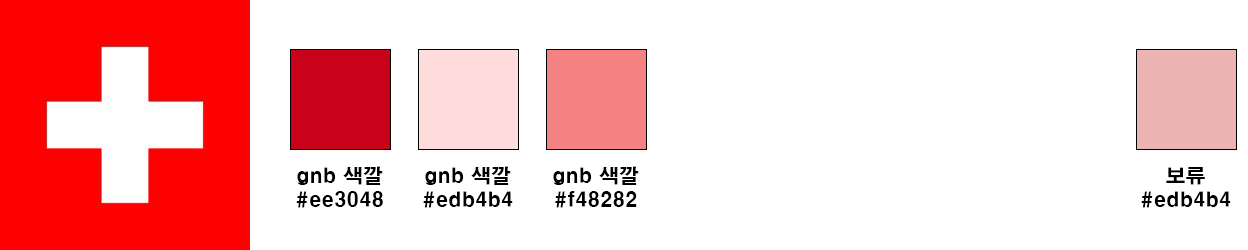
<style>
.page{position:relative;width:1248px;height:250px;background:#ffffff}
.page>*{position:absolute;margin:0}
.t1{font:20px "H2gtrE";color:#000000}
</style>
<div class="page">
<p class="t1" style="left:296px;top:166px;width:87px;height:42px;text-align:center">gnb 색깔<br>#ee3048</p>
<p class="t1" style="left:423px;top:166px;width:90px;height:42px;text-align:center">gnb 색깔<br>#edb4b4</p>
<p class="t1" style="left:553px;top:166px;width:86px;height:42px;text-align:center">gnb 색깔<br>#f48282</p>
<p class="t1" style="left:1141px;top:167px;width:90px;height:41px;text-align:center">보류<br>#edb4b4</p>
</div>
